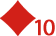
<style>
.page{position:relative;width:56px;height:36px;background:#ffffff}
.page>*{position:absolute;margin:0}
.t1{font:23.4px "MyriadPro-Regular";letter-spacing:-0.1em;color:#d22018;font-weight:bold}
</style>
<div class="page">
<p class="t1" style="left:35px;top:19px;width:20px;height:17px">10</p>
</div>
